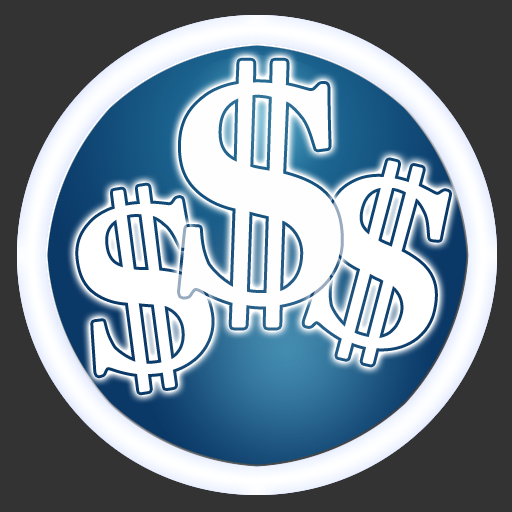
<style>
.page{position:relative;width:512px;height:512px;background:#333333}
.page>*{position:absolute;margin:0}
.t1{font:355.6px "ACaslonPro-Bold";color:#fefefe;scale:1.07 1}
.t2{font:270.8px "ACaslonPro-Bold";color:#ffffff;scale:1.07 1}
</style>
<div class="page">
<p class="t1" style="left:180px;top:60px;width:161px;height:268px">$</p>
<p class="t2" style="left:304px;top:160px;width:145px;height:205px;rotate:13deg">$</p>
<p class="t2" style="left:78px;top:185px;width:134px;height:208px;rotate:-9deg">$</p>
</div>
